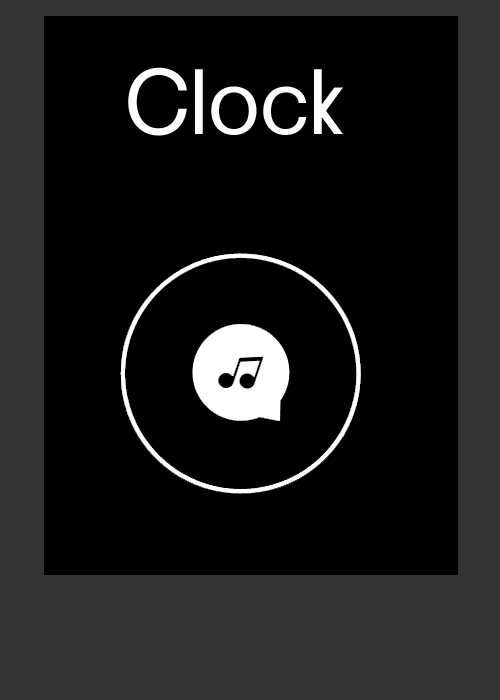
<style>
.page{position:relative;width:500px;height:700px;background:#000000}
.page>*{position:absolute;margin:0}
.t1{font:90px "ClementePDag-Book";color:#ffffff}
</style>
<div class="page">
<p class="t1" style="left:128px;top:67px;width:215px;height:69px">Clock</p>
</div>
